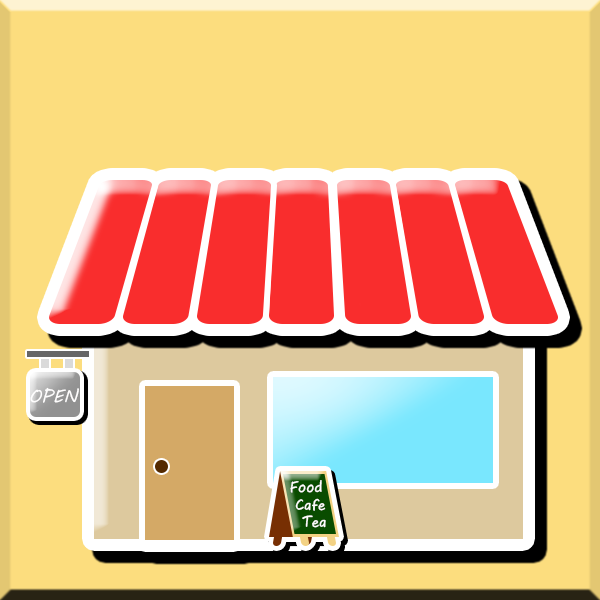
<style>
.page{position:relative;width:600px;height:600px;background:#fcdd7e}
.page>*{position:absolute;margin:0}
.t1{font:17.7px "MVBoli";color:#fffefe}
.t2{font:15.7px "MVBoli";color:#fffefe}
</style>
<div class="page">
<p class="t1" style="left:30px;top:387px;width:49px;height:16px">OPEN</p>
<p class="t2" style="left:290px;top:480px;width:32px;height:13px">Food</p>
<p class="t2" style="left:295px;top:498px;width:31px;height:13px">Cafe</p>
<p class="t2" style="left:302px;top:515px;width:24px;height:13px">Tea</p>
</div>
